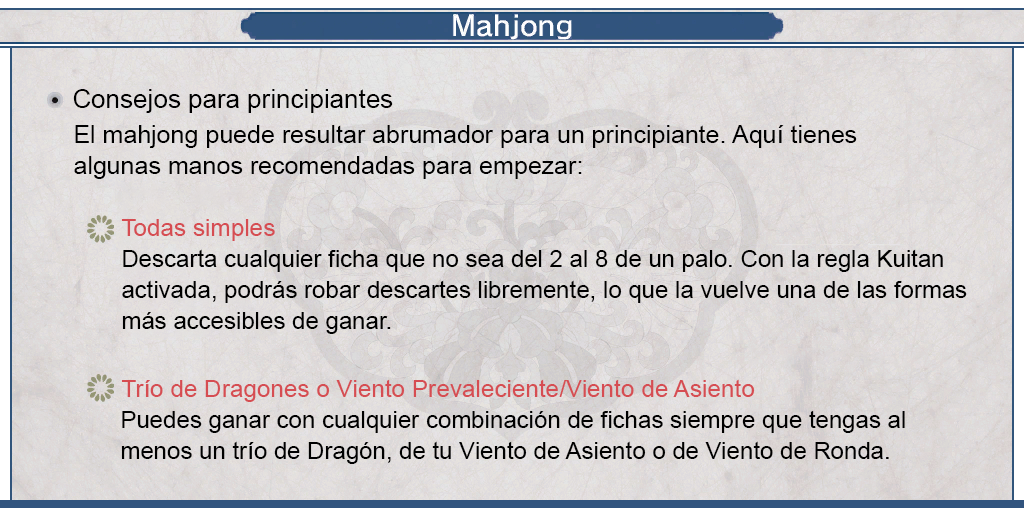
<style>
.page{position:relative;width:1024px;height:512px}
.page>*{position:absolute;margin:0}
.t1{font:26px "ArialMT";color:#000000}
.t2{font:25px/31px "ArialMT";color:#000000}
.t3{font:24px "ArialMT";color:#d64d52}
.t4{font:24px/31px "ArialMT";color:#000000}
</style>
<div class="page">
<p class="t1" style="left:73px;top:89px;width:320px;height:24px">Consejos para principiantes</p>
<p class="t2" style="left:74px;top:125px;width:783px;height:54px;text-align:justify">El mahjong puede resultar abrumador para un principiante. Aquí tienes <br>algunas manos recomendadas para empezar:</p>
<p class="t3" style="left:121px;top:219px;width:154px;height:22px">Todas simples</p>
<p class="t4" style="left:122px;top:249px;width:845px;height:85px;text-align:justify">Descarta cualquier ficha que no sea del 2 al 8 de un palo. Con la regla Kuitan<br>activada, podrás robar descartes libremente, lo que la vuelve una de las formas<br>más accesibles de ganar.</p>
<p class="t3" style="left:121px;top:379px;width:634px;height:23px">Trío de Dragones o Viento Prevaleciente/Viento de Asiento</p>
<p class="t4" style="left:121px;top:410px;width:784px;height:54px;text-align:justify">Puedes ganar con cualquier combinación de fichas siempre que tengas al <br>menos un trío de Dragón, de tu Viento de Asiento o de Viento de Ronda.</p>
</div>
